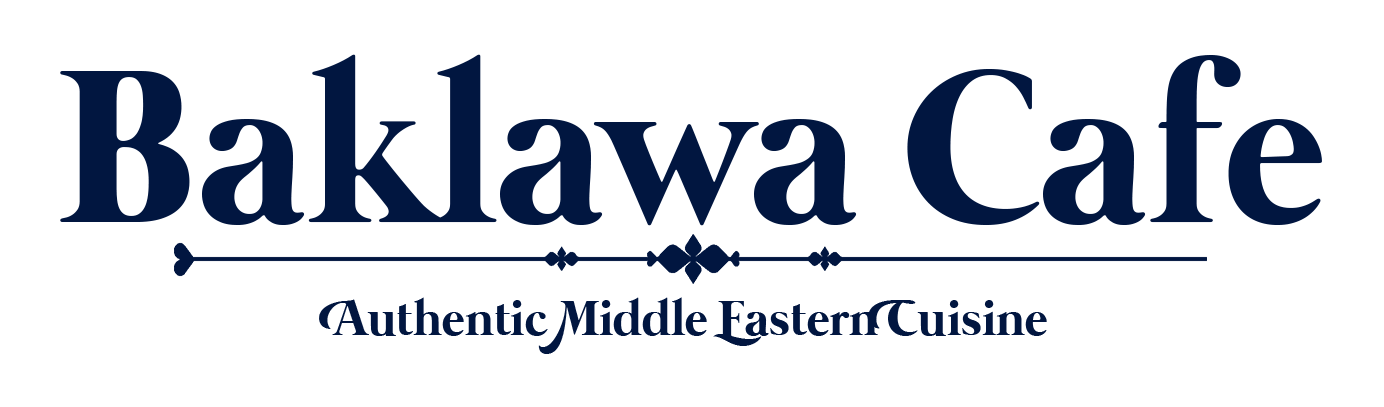
<style>
.page{position:relative;width:1384px;height:407px;background:#ffffff}
.page>*{position:absolute;margin:0}
.t1{font:223.2px "Mermaid-Bold";color:#011640}
.t2{font:50px "MermaidSwashCaps-Bold";color:#011640}
</style>
<div class="page">
<p class="t1" style="left:60px;top:54px;width:1262px;height:172px">Baklawa Cafe</p>
<p class="t2" style="left:319px;top:297px;width:728px;height:57px">Authentic Middle Eastern Cuisine</p>
</div>
